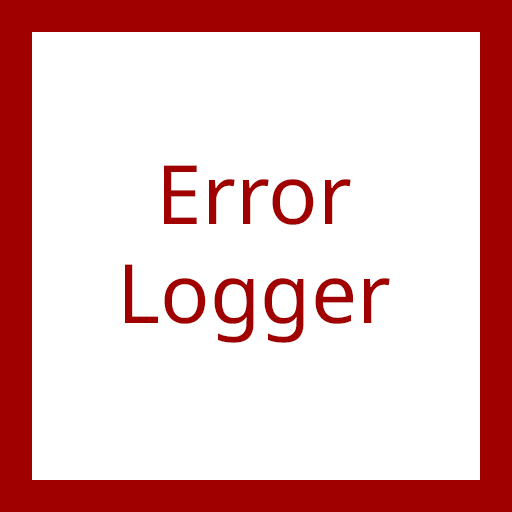
<style>
.page{position:relative;width:512px;height:512px;background:#ffffff}
.page>*{position:absolute;margin:0}
.t1{font:82px "NotoSans-Regular";color:#a00000}
</style>
<div class="page">
<p class="t1" style="left:125px;top:165px;width:265px;height:178px;text-align:center">Error<br>Logger</p>
</div>
